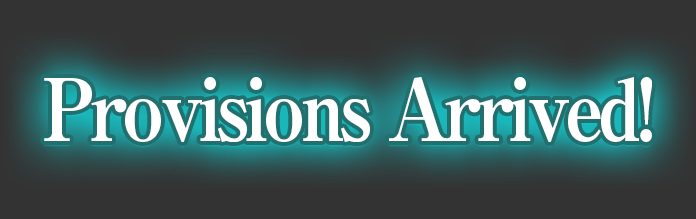
<style>
.page{position:relative;width:696px;height:219px;background:#333333}
.page>*{position:absolute;margin:0}
.t1{font:86px "RyuminPro-ExBold";letter-spacing:-0.08em;color:#ffffff;scale:0.9 1}
</style>
<div class="page">
<p class="t1" style="left:44px;top:77px;width:608px;height:65px">Provisions Arrived!</p>
</div>
